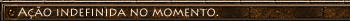
<style>
.page{position:relative;width:350px;height:21px}
.page>*{position:absolute;margin:0}
.t1{font:12px "LithosPro-Regular";color:#fcead6}
</style>
<div class="page">
<p class="t1" style="left:18px;top:6px;width:200px;height:13px">Ação indefinida no momento.</p>
</div>
